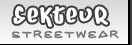
<style>
.page{position:relative;width:132px;height:45px}
.page>*{position:absolute;margin:0}
.t1{font:22.5px "Juice";letter-spacing:0.15em;color:#ffffff;scale:0.8 1}
.t2{font:12px "AQZcrew";letter-spacing:0.15em;color:#767879}
</style>
<div class="page">
<p class="t1" style="left:13px;top:6px;width:95px;height:21px">Sekteur</p>
<p class="t2" style="left:12px;top:30px;width:107px;height:9px">StreetWear</p>
</div>
